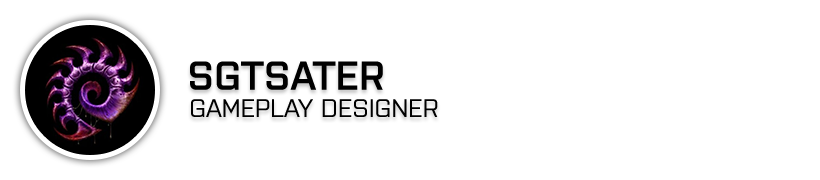
<style>
.page{position:relative;width:820px;height:180px;background:#ffffff}
.page>*{position:absolute;margin:0}
.t1{font:40.5px "Purista-SemiBold";color:#000000;text-transform:uppercase}
.t2{font:25.5px "Purista-Medium";color:#000000;text-transform:uppercase}
</style>
<div class="page">
<p class="t1" style="left:190px;top:61px;width:193px;height:29px">sgtsater</p>
<p class="t2" style="left:191px;top:99px;width:247px;height:18px">gameplay designer</p>
</div>
